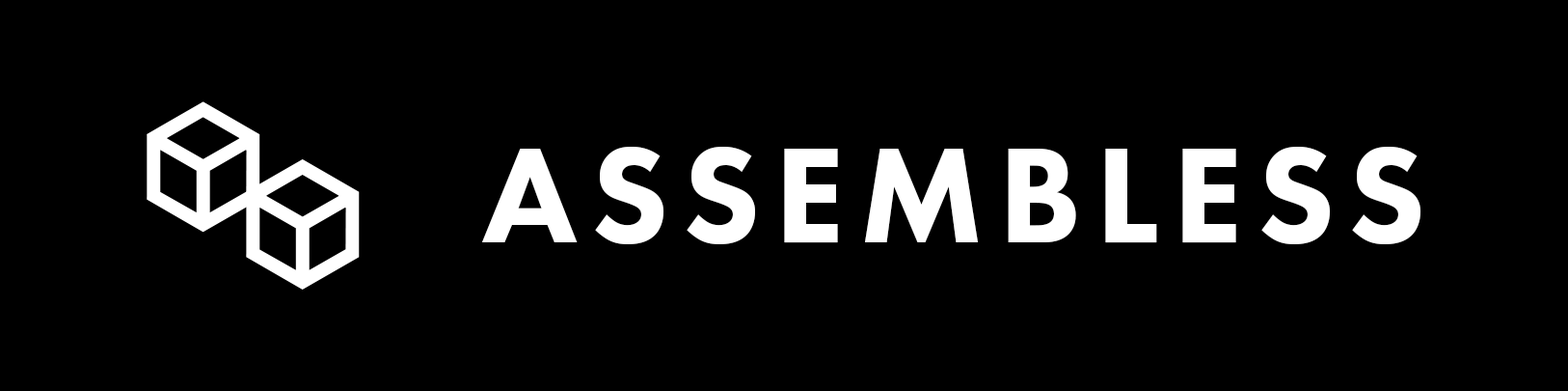
<style>
.page{position:relative;width:1568px;height:391px;background:#000000}
.page>*{position:absolute;margin:0}
.t1{font:140.6px "FuturaPT-Heavy";letter-spacing:0.1em;color:#ffffff;text-transform:uppercase}
</style>
<div class="page">
<p class="t1" style="left:482px;top:147px;width:938px;height:97px">Assembless</p>
</div>
